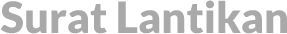
<style>
.page{position:relative;width:287px;height:34px;background:#ffffff}
.page>*{position:absolute;margin:0}
.t1{font:43.2px "Lato-Black";color:#a9a9a9}
</style>
<div class="page">
<p class="t1" style="left:0px;top:0px;width:287px;height:34px">Surat Lantikan</p>
</div>
